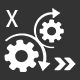
<style>
.page{position:relative;width:80px;height:80px;background:#333333}
.page>*{position:absolute;margin:0}
.t1{font:21.3px "AdobeHeitiStd-Regular";color:#ffffff}
</style>
<div class="page">
<p class="t1" style="left:6px;top:10px;width:12px;height:17px">X</p>
</div>
